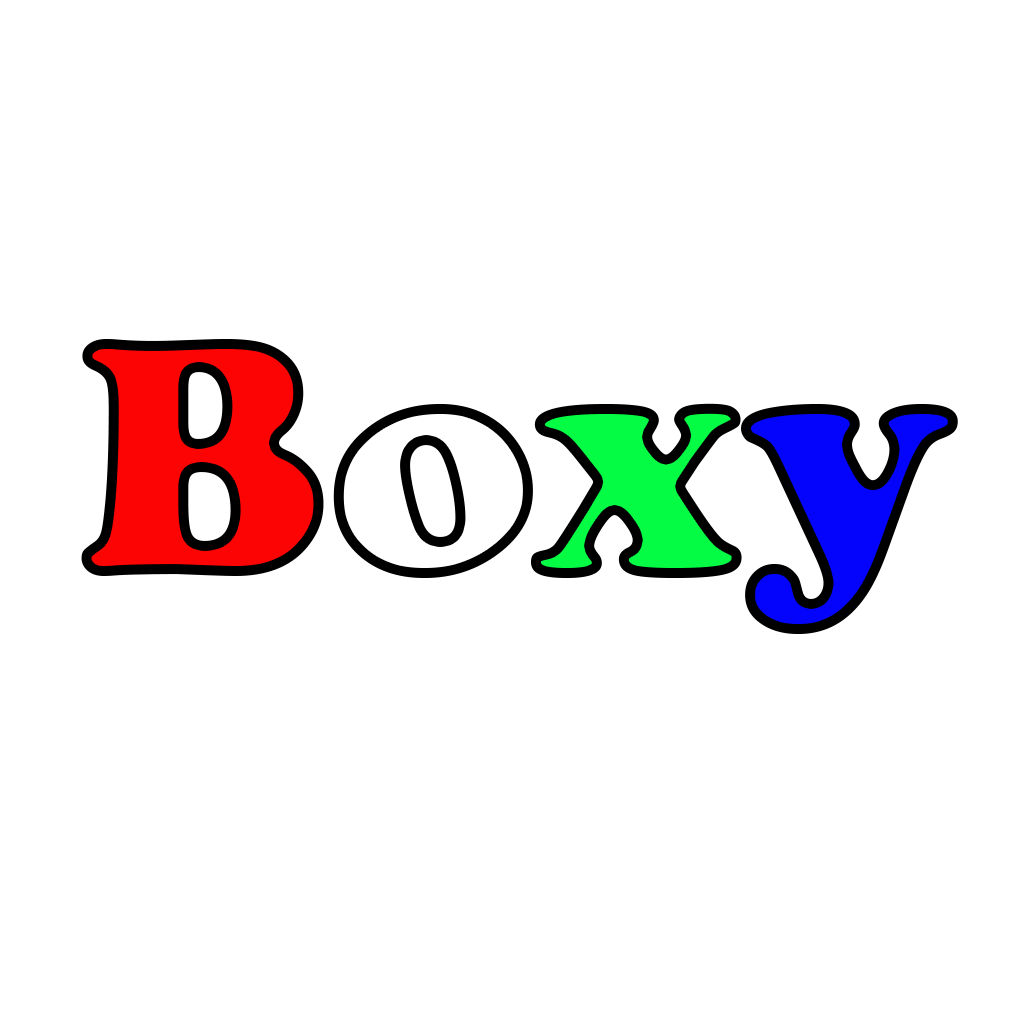
<style>
.page{position:relative;width:1024px;height:1024px;background:#ffffff}
.page>*{position:absolute;margin:0}
.t1{font:350px "CooperBlack";color:#fd0404}
.t2{font:350px "CooperBlack";color:#ffffff}
.t3{font:350px "CooperBlack";color:#04fd44}
.t4{font:350px "CooperBlack";color:#0404fd}
</style>
<div class="page">
<p class="t1" style="left:81px;top:339px;width:877px;height:295px">B<span class="t2">o</span><span class="t3">x</span><span class="t4">y</span></p>
</div>
